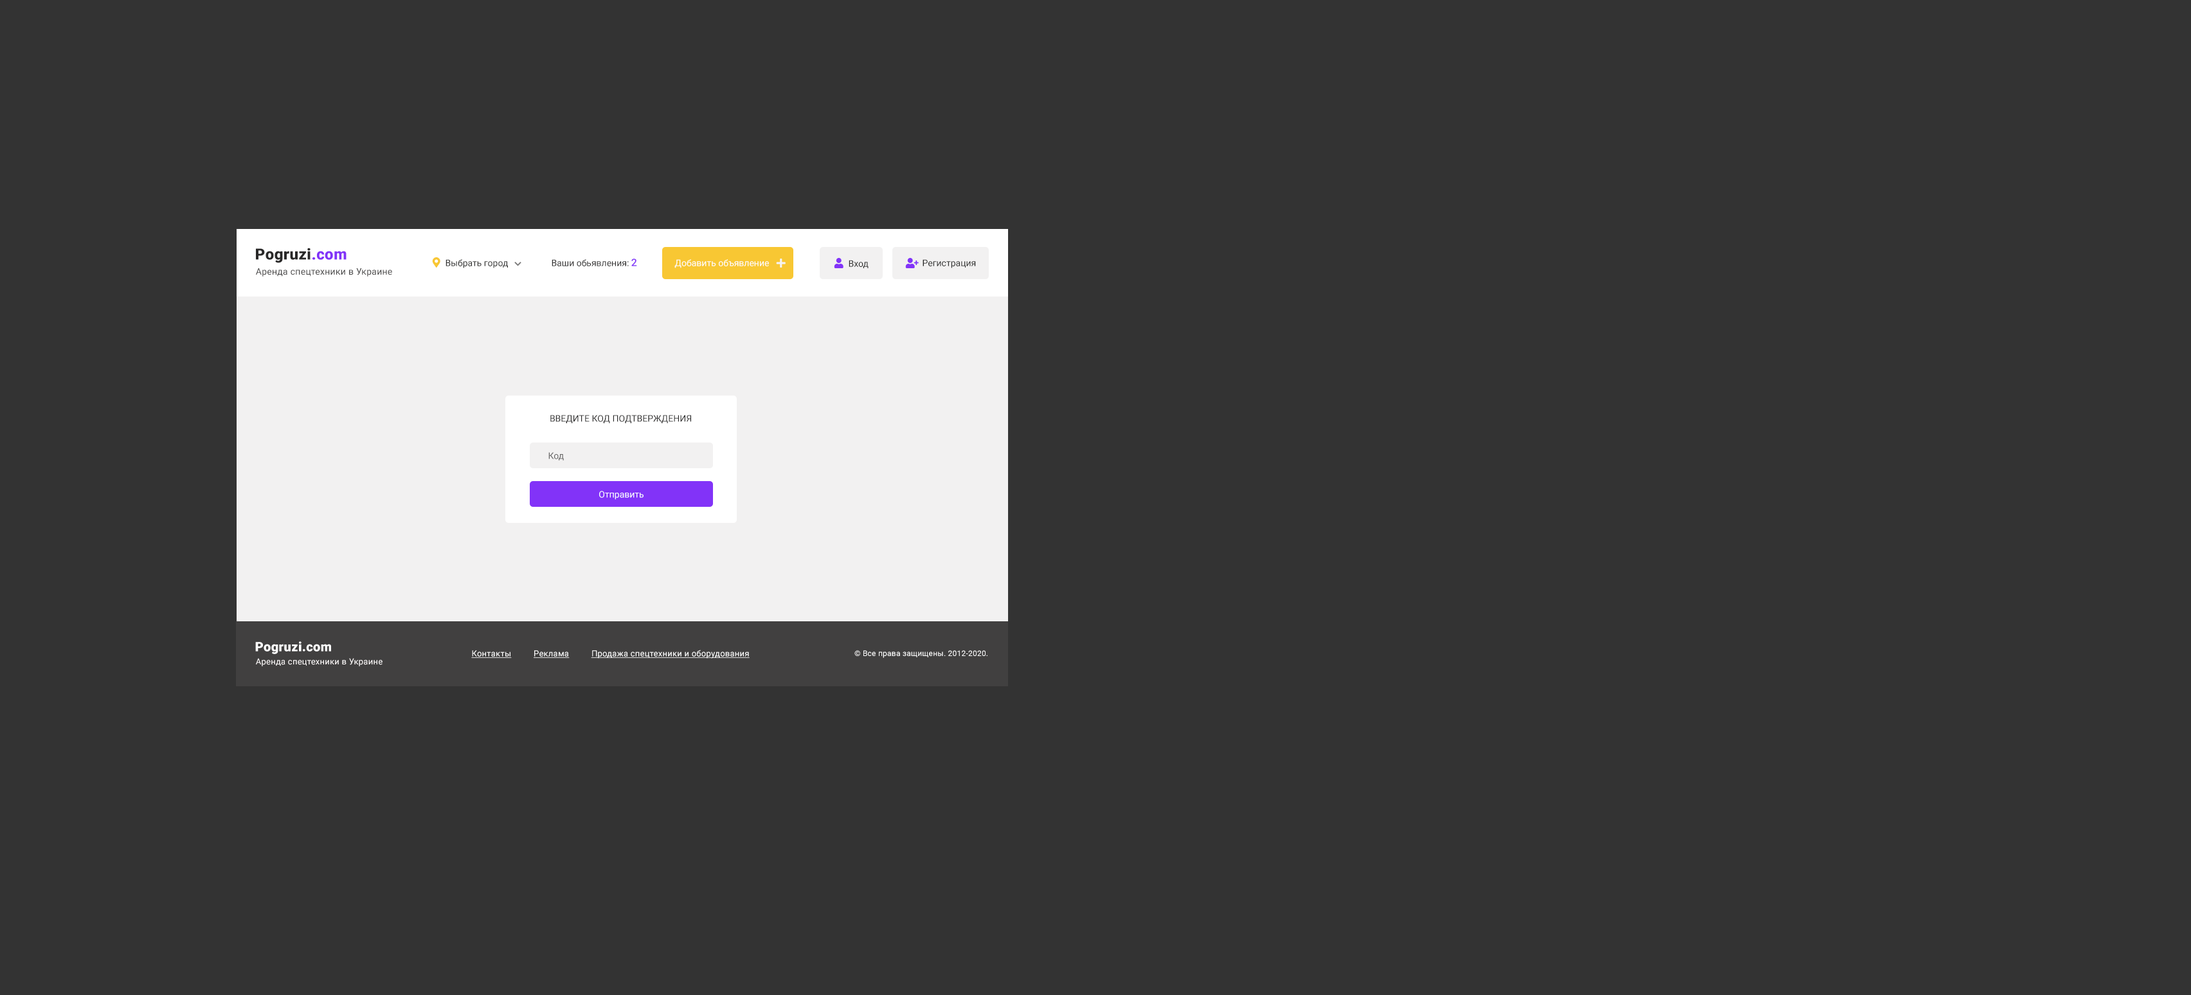
<style>
.page{position:relative;width:2191px;height:995px;background:#333333}
.page>*{position:absolute;margin:0}
.t1{font:15.4px "Roboto-Black";letter-spacing:0.02em;color:#292828}
.t2{font:15.4px "Roboto-Black";letter-spacing:0.02em;color:#8233f8}
.t3{font:9px "Roboto-Regular";letter-spacing:0.02em;color:#414040}
.t4{font:9px "Roboto-Regular";color:#2a2a29}
.t5{font:9px "Roboto-Regular";color:#2b2a2a}
.t6{font:10.3px "Roboto-Medium";color:#8233f8}
.t7{font:9px "Roboto-Regular";color:#ffffff}
.t8{font:9px "Roboto-Regular";color:#292828;text-transform:uppercase}
.t9{font:9px "Roboto-Regular";color:#616060}
.t10{font:12.9px "Roboto-Black";letter-spacing:0.02em;color:#ffffff}
.t11{font:8.4px "Roboto-Regular";letter-spacing:0.02em;color:#ffffff;text-decoration:underline}
.t12{font:7.7px "Roboto-Regular";letter-spacing:0.02em;color:#ffffff}
.t13{font:8.4px "Roboto-Regular";letter-spacing:0.02em;color:#fdfafa}
</style>
<div class="page">
<p class="t1" style="left:256px;top:248px;width:90px;height:15px">Pogruzi<span class="t2">.com</span></p>
<p class="t3" style="left:256px;top:268px;width:136px;height:8px">Аренда спецтехники в Украине</p>
<p class="t4" style="left:446px;top:259px;width:62px;height:9px">Выбрать город</p>
<p class="t5" style="left:552px;top:258px;width:85px;height:8px">Ваши обьявления: <span class="t6">2</span></p>
<p class="t7" style="left:674px;top:259px;width:95px;height:9px">Добавить объявление</p>
<p class="t4" style="left:849px;top:260px;width:20px;height:8px">Вход</p>
<p class="t4" style="left:923px;top:259px;width:53px;height:9px">Регистрация</p>
<p class="t8" style="left:550px;top:415px;width:141px;height:8px">введите код подтверждения</p>
<p class="t9" style="left:548px;top:452px;width:16px;height:8px">Код</p>
<p class="t7" style="left:599px;top:491px;width:45px;height:9px">Отправить</p>
<p class="t10" style="left:255px;top:641px;width:76px;height:13px">Pogruzi.com</p>
<p class="t11" style="left:471px;top:649px;width:279px;height:9px">Контакты          Реклама          Продажа спецтехники и оборудования</p>
<p class="t12" style="left:854px;top:650px;width:133px;height:8px">© Все права защищены. 2012-2020.</p>
<p class="t13" style="left:256px;top:658px;width:126px;height:8px">Аренда спецтехники в Украине</p>
</div>
